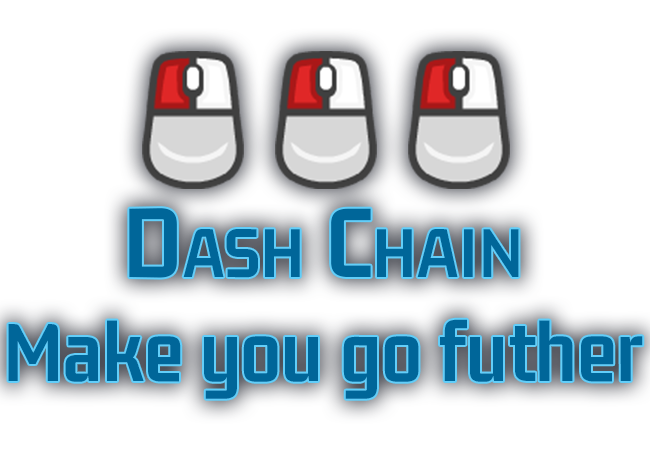
<style>
.page{position:relative;width:650px;height:450px;background:#ffffff}
.page>*{position:absolute;margin:0}
.t1{font:107.5px "GemunuLibre-Bold";color:#006699;font-variant:small-caps;font-weight:bold}
.t2{font:89.6px "GemunuLibre-Bold";color:#006699;font-weight:bold}
</style>
<div class="page">
<p class="t1" style="left:129px;top:208px;width:390px;height:70px">Dash Chain</p>
<p class="t2" style="left:8px;top:319px;width:635px;height:80px">Make you go futher</p>
</div>
